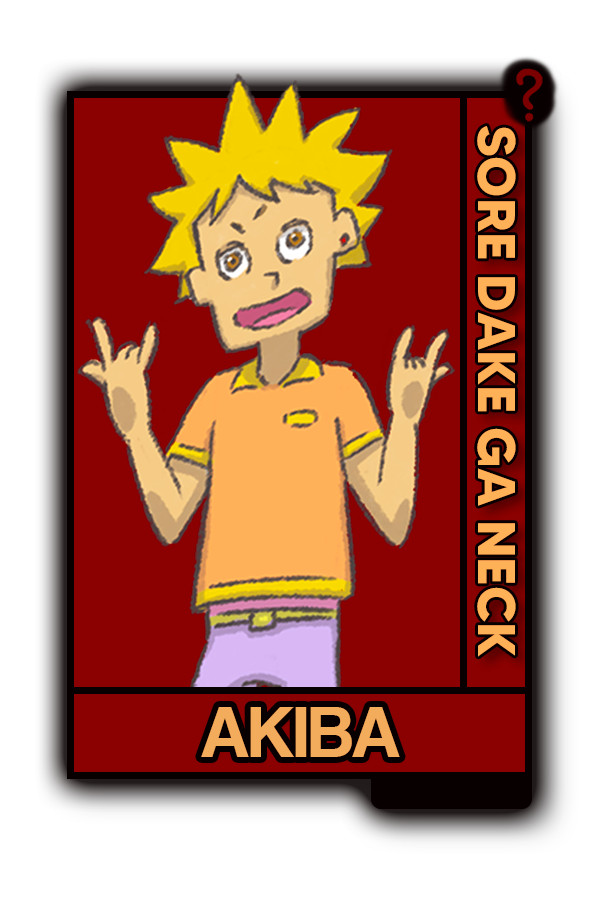
<style>
.page{position:relative;width:600px;height:900px;background:#8b0000}
.page>*{position:absolute;margin:0}
.t1{font:52.7px "MADETOMMY-Bold";color:#ffb158}
.t2{font:75px "CoolveticaRg-Regular";color:#f3ac5c}
</style>
<div class="page">
<p class="t1" style="left:477px;top:126px;width:39px;height:531px;rotate:90deg">SORE DAKE GA NECK</p>
<p class="t2" style="left:201px;top:707px;width:199px;height:50px">AKIBA</p>
</div>
